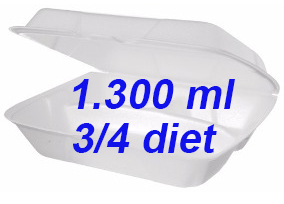
<style>
.page{position:relative;width:284px;height:204px;background:#fefefe}
.page>*{position:absolute;margin:0}
.t1{font:72px "Arial-BoldMT";color:#1111ea;font-style:italic}
</style>
<div class="page">
<p class="t1" style="left:73px;top:79px;width:162px;height:30px">1.300 ml</p>
<p class="t1" style="left:73px;top:123px;width:144px;height:30px">3/4 diet</p>
</div>
